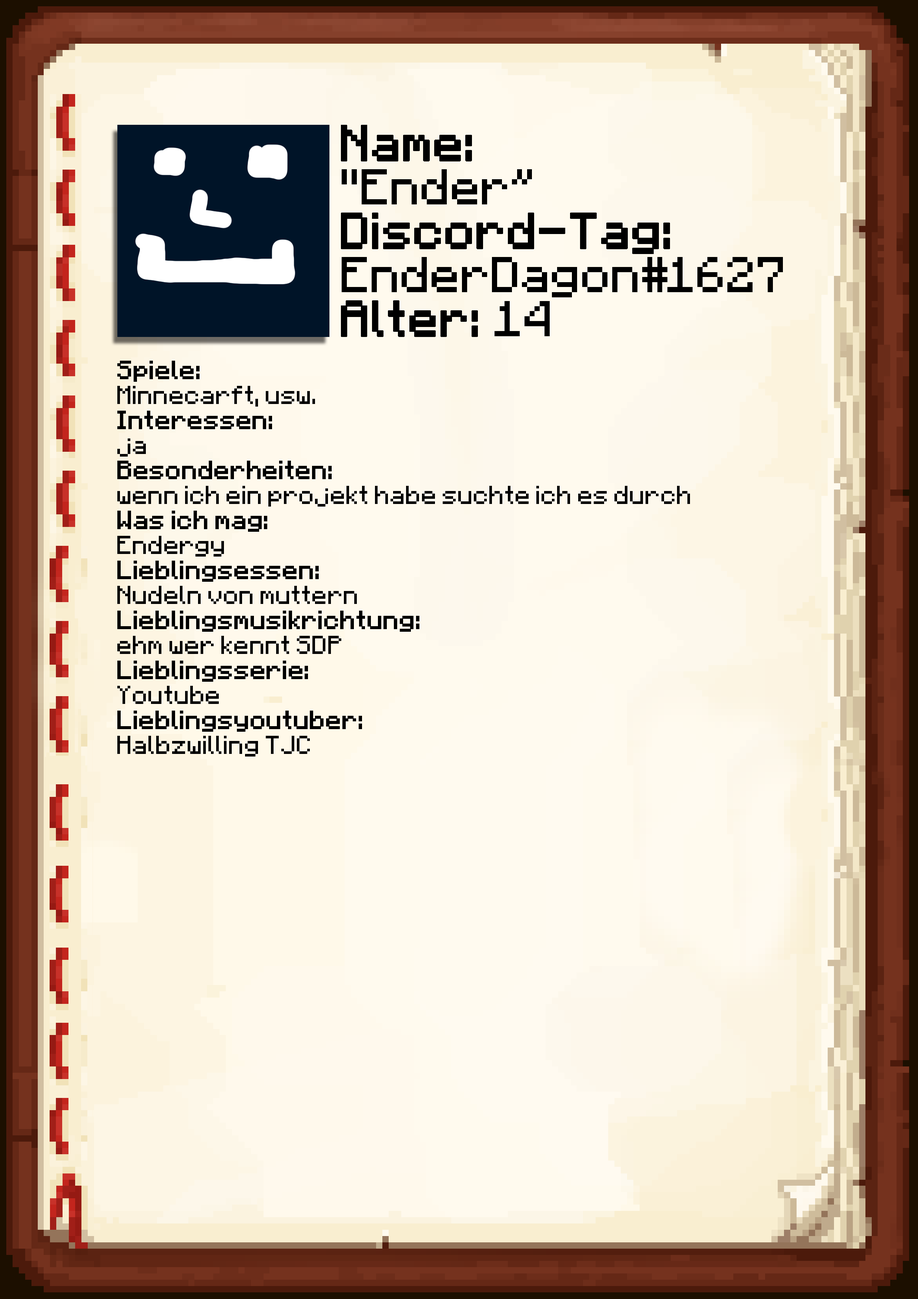
<style>
.page{position:relative;width:918px;height:1299px}
.page>*{position:absolute;margin:0}
.t1{font:40.1px/43.9px "Minecraft";color:#000000}
.t2{font:40.1px/43.9px "Minecraft";color:#000000;font-weight:bold}
.t3{font:20.8px "Minecraft";color:#000000}
.t4{font:20.8px "Minecraft";color:#000000;font-weight:bold}
</style>
<div class="page">
<p class="t1" style="left:341px;top:125px;width:442px;height:212px"><span class="t2">Name:<br></span>"Ender”<br><span class="t2">Discord-Tag:<br></span>EnderDagon#1627<br><span class="t2">Alter: </span>14</p>
<p class="t3" style="left:117px;top:361px;width:573px;height:395px"><span class="t4">Spiele: <br></span>Minnecarft, usw.<br><span class="t4">Interessen:<br></span>ja<br><span class="t4">Besonderheiten:</span><br>wenn ich ein projekt habe suchte ich es durch<br><span class="t4">Was ich mag:<br></span>Endergy<br><span class="t4">Lieblingsessen:<br></span>Nudeln von muttern<br><span class="t4">Lieblingsmusikrichtung:<br></span>ehm wer kennt SDP<br><span class="t4">Lieblingsserie:<br></span>Youtube<br><span class="t4">Lieblingsyoutuber:<br></span>Halbzwilling TJC</p>
</div>
